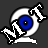
<style>
.page{position:relative;width:48px;height:48px;background:#333333}
.page>*{position:absolute;margin:0}
.t1{font:20.8px "TimesNewRomanPS-BoldMT";color:#ffffff}
</style>
<div class="page">
<p class="t1" style="left:1px;top:4px;width:45px;height:39px;rotate:-35deg">M   T</p>
</div>
